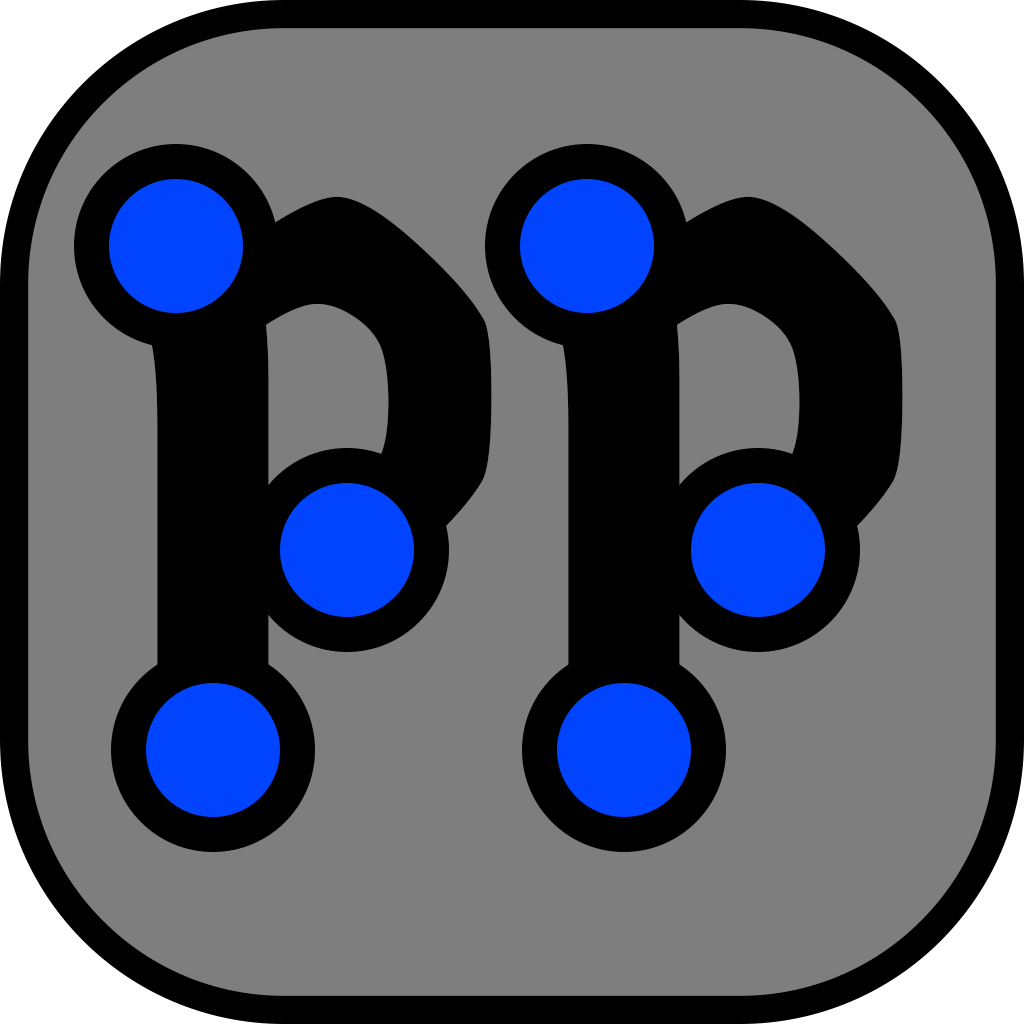
<style>
.page{position:relative;width:1024px;height:1024px;background:#7e7e7e}
.page>*{position:absolute;margin:0}
.t1{font:805.1px "GermaniaOne-Regular";color:#000000}
</style>
<div class="page">
<p class="t1" style="left:109px;top:196px;width:794px;height:574px">PP</p>
</div>
